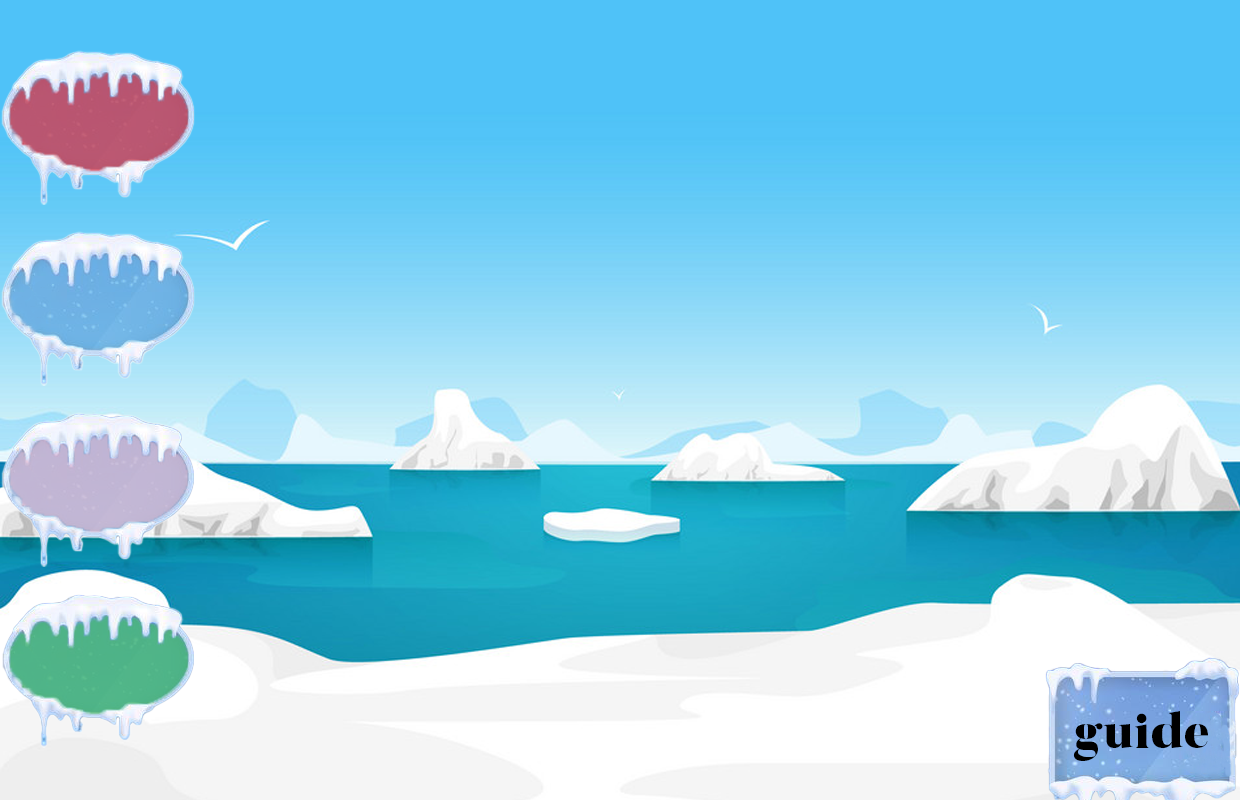
<style>
.page{position:relative;width:1240px;height:800px}
.page>*{position:absolute;margin:0}
.t1{font:50px "Butler-Black";color:#000000}
</style>
<div class="page">
<p class="t1" style="left:1073px;top:711px;width:135px;height:50px">guide</p>
</div>
